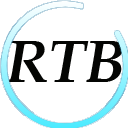
<style>
.page{position:relative;width:128px;height:128px;background:#ffffff}
.page>*{position:absolute;margin:0}
.t1{font:60px "PalatinoLinotype-BoldItalic";color:#040503}
</style>
<div class="page">
<p class="t1" style="left:5px;top:41px;width:118px;height:41px">RTB</p>
</div>
